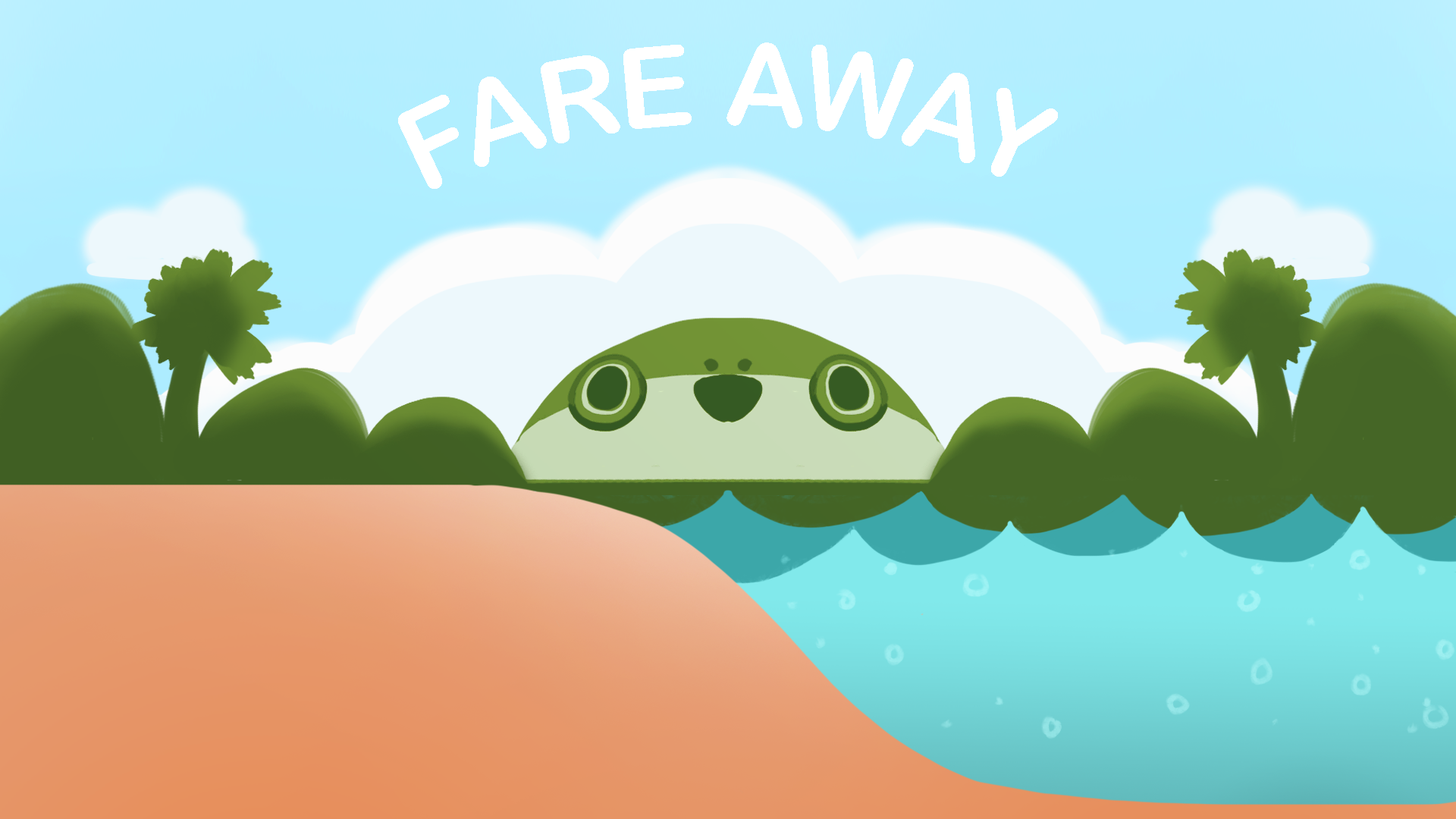
<style>
.page{position:relative;width:1456px;height:819px}
.page>*{position:absolute;margin:0}
.t1{font:113.7px "ArialRoundedMTBold";color:#ffffff;text-transform:uppercase}
</style>
<div class="page">
<p class="t1" style="left:398px;top:42px;width:660px;height:147px">FARE AWAY</p>
</div>
